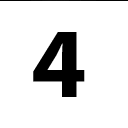
<style>
.page{position:relative;width:128px;height:128px;background:#ffffff}
.page>*{position:absolute;margin:0}
.t1{font:100px "MyriadHebrew-Bold";color:#000000}
</style>
<div class="page">
<p class="t1" style="left:33px;top:31px;width:52px;height:65px">4</p>
</div>
